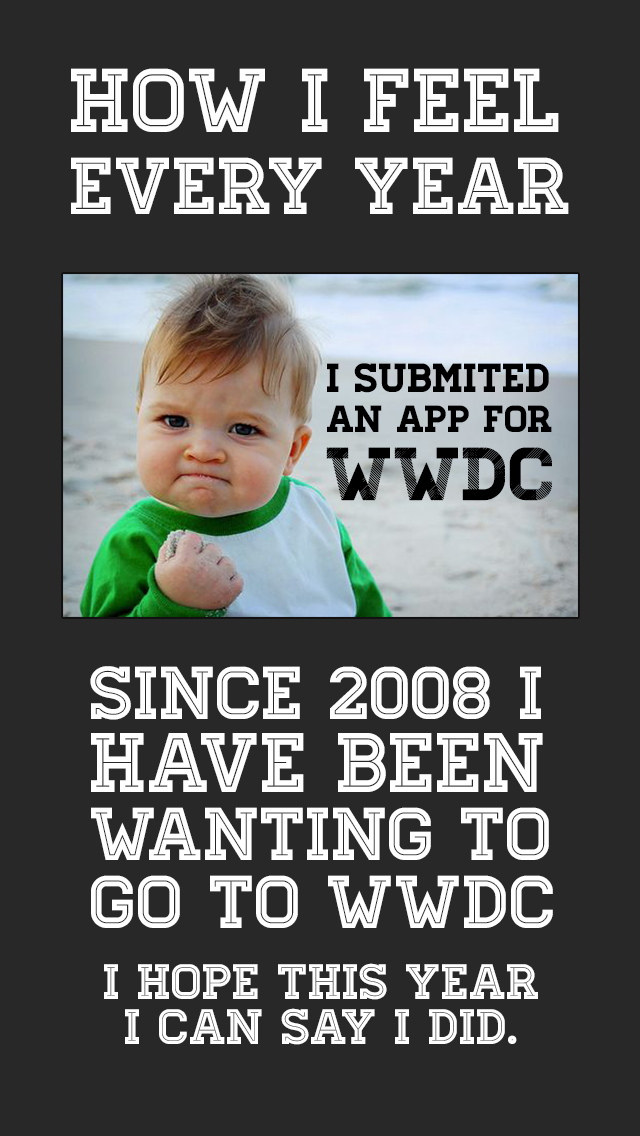
<style>
.page{position:relative;width:640px;height:1136px;background:#282828}
.page>*{position:absolute;margin:0}
.t1{font:90.6px/81.5px "Homestead-Inline";color:#fffefe}
.t2{font:80.6px/81.5px "Homestead-Inline";color:#fffefe}
.t3{font:40.8px/40.5px "Homestead-Regular";color:#000000}
.t4{font:37.7px/40.5px "Homestead-Regular";color:#000000}
.t5{font:74.7px/67.9px "Homestead-Display";color:#000000}
.t6{font:74.7px/67.9px "Homestead-Inline";color:#ffffff}
.t7{font:84.2px/72.4px "Homestead-Inline";color:#ffffff}
.t8{font:49.8px/45.1px "Homestead-Inline";color:#ffffff}
</style>
<div class="page">
<p class="t1" style="left:71px;top:68px;width:498px;height:146px">How I feel<br><span class="t2">every year</span></p>
<p class="t3" style="left:326px;top:363px;width:226px;height:138px">I submited<br><span class="t4">An app for<br></span><span class="t5">WWDC</span></p>
<p class="t6" style="left:90px;top:666px;width:463px;height:262px">Since 2008 I<br><span class="t7">have been<br></span>wanting to<br>go to wwdc</p>
<p class="t8" style="left:104px;top:963px;width:434px;height:82px;text-align:center">I hope this year<br>I can say I did.</p>
</div>
